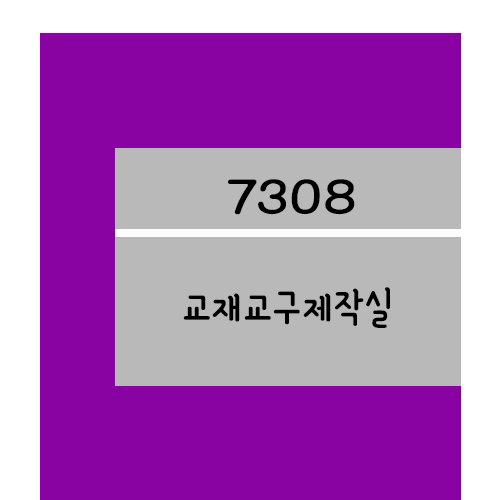
<style>
.page{position:relative;width:500px;height:500px;background:#8803a1}
.page>*{position:absolute;margin:0}
.t1{font:61.2px "YanoljaYacheR";color:#000000;scale:1.18 1}
.t2{font:48px "YanoljaYacheR";color:#000000}
</style>
<div class="page">
<p class="t1" style="left:228px;top:179px;width:127px;height:36px">7308</p>
<p class="t2" style="left:183px;top:287px;width:207px;height:41px">교재교구제작실</p>
</div>
